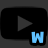
<style>
.page{position:relative;width:48px;height:48px;background:#000000}
.page>*{position:absolute;margin:0}
.t1{font:18px "Troika";color:#60c1ff}
</style>
<div class="page">
<p class="t1" style="left:31px;top:31px;width:13px;height:13px">W</p>
</div>
